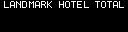
<style>
.page{position:relative;width:128px;height:32px;background:#000000}
.page>*{position:absolute;margin:0}
.t1{font:10px "Terminal";letter-spacing:-0.125em;color:#ffffff}
</style>
<div class="page">
<p class="t1" style="left:4px;top:1px;width:85px;height:7px">LANDMARK HOTEL</p>
</div>
